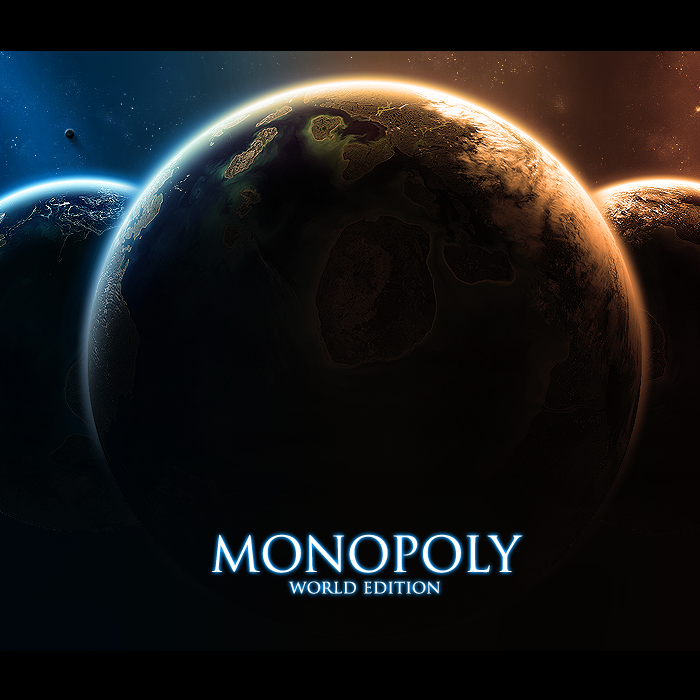
<style>
.page{position:relative;width:700px;height:700px}
.page>*{position:absolute;margin:0}
.t1{font:18px "TrajanPro-Regular";color:#ffffff}
.t2{font:48px "TrajanPro-Regular";color:#ffffff}
</style>
<div class="page">
<p class="t1" style="left:211px;top:534px;width:312px;height:60px;text-align:center"><span class="t2">MONOPOLY <br></span>world edition</p>
</div>
